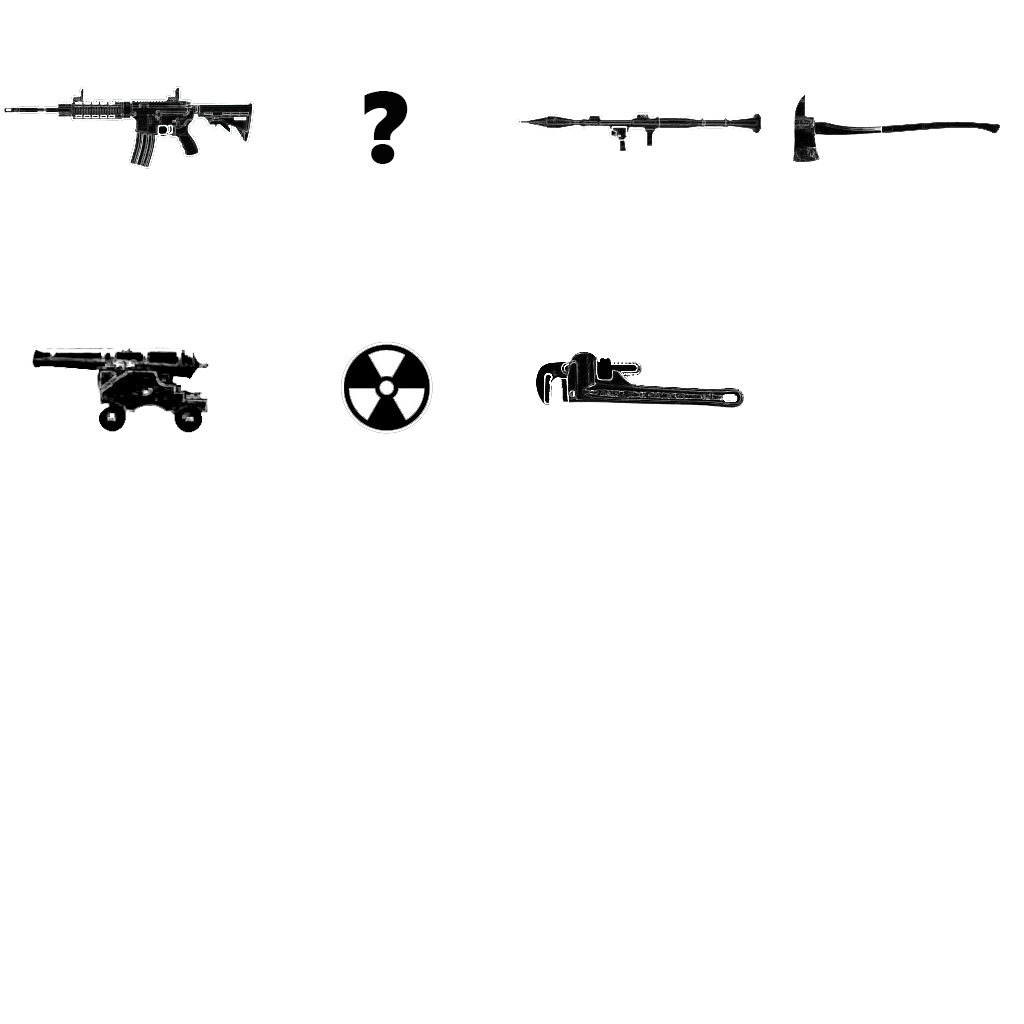
<style>
.page{position:relative;width:1024px;height:1024px;background:#ffffff}
.page>*{position:absolute;margin:0}
.t1{font:100px "SegoeUIBlack";letter-spacing:-0.007em;color:#030303}
</style>
<div class="page">
<p class="t1" style="left:364px;top:91px;width:44px;height:73px">?</p>
</div>
